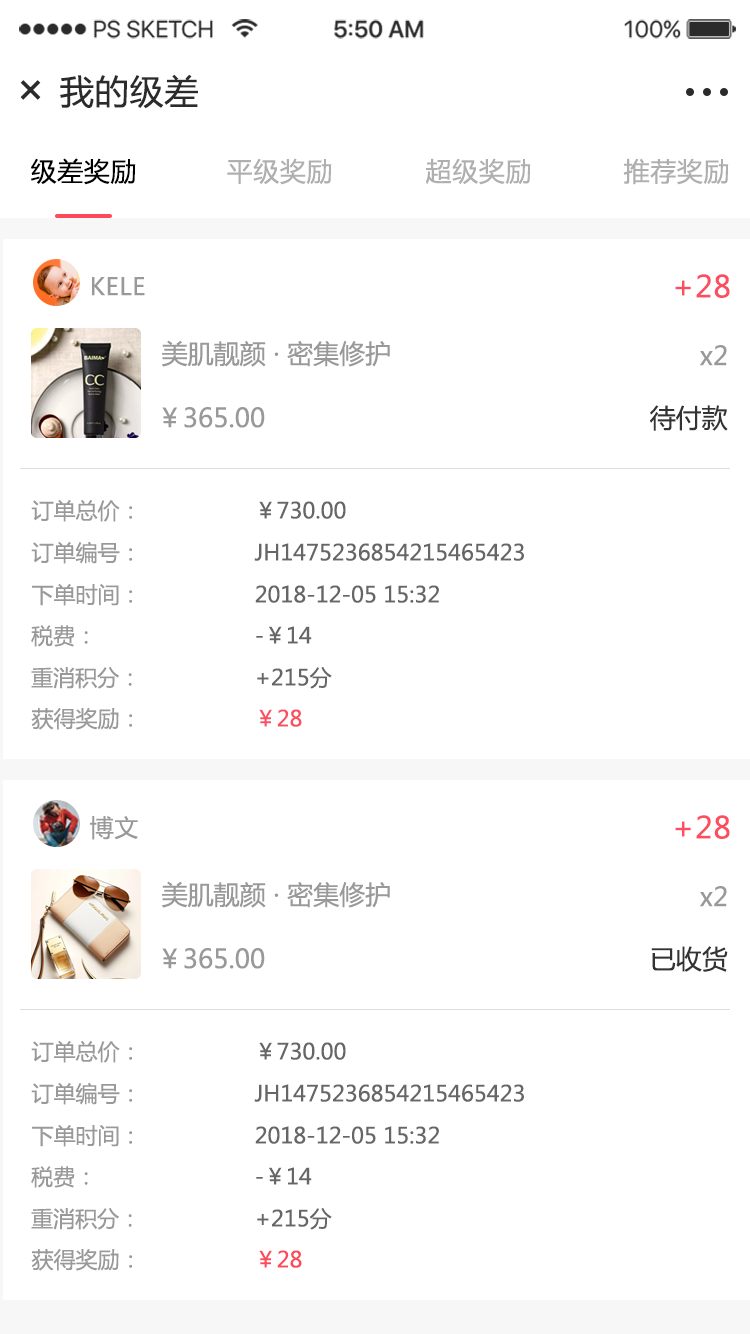
<style>
.page{position:relative;width:750px;height:1334px;background:#ffffff}
.page>*{position:absolute;margin:0}
.t1{font:34px "MicrosoftYaHei";letter-spacing:0.025em;color:#2b2b2b;text-transform:uppercase}
.t2{font:47.9px "MicrosoftYaHei";letter-spacing:0.025em;color:#2b2b2b;text-transform:uppercase}
.t3{font:26px "MicrosoftYaHei";letter-spacing:0.025em;color:#000000}
.t4{font:26px "MicrosoftYaHei";letter-spacing:0.025em;color:#afafaf}
.t5{font:24px "MicrosoftYaHei";letter-spacing:0.025em;color:#999999;text-transform:uppercase}
.t6{font:30px "MicrosoftYaHei";letter-spacing:0.025em;color:#fc4e5f;text-transform:uppercase}
.t7{font:26px "MicrosoftYaHei";color:#999999;text-transform:uppercase}
.t8{font:26px "MicrosoftYaHei";color:#999999}
.t9{font:26px "MicrosoftYaHei";color:#333333;text-transform:uppercase}
.t10{font:22px "MicrosoftYaHei";color:#999999;text-transform:uppercase}
.t11{font:22px "MicrosoftYaHei";color:#666666;text-transform:uppercase}
.t12{font:22px "MicrosoftYaHei";color:#fc4e5f;text-transform:uppercase}
.t13{font:22px "MicrosoftYaHei";color:#fc4a5b;text-transform:uppercase}
</style>
<div class="page">
<p class="t1" style="left:60px;top:74px;width:138px;height:35px">我的级差</p>
<p class="t2" style="left:20px;top:80px;width:21px;height:20px;rotate:45deg">+</p>
<p class="t3" style="left:30px;top:158px;width:106px;height:27px">级差奖励</p>
<p class="t4" style="left:227px;top:158px;width:105px;height:27px">平级奖励</p>
<p class="t4" style="left:426px;top:158px;width:105px;height:27px">超级奖励</p>
<p class="t4" style="left:623px;top:158px;width:106px;height:27px">推荐奖励</p>
<p class="t5" style="left:92px;top:277px;width:53px;height:19px">kele</p>
<p class="t6" style="left:675px;top:274px;width:55px;height:24px">+28</p>
<p class="t7" style="left:162px;top:340px;width:228px;height:27px">美肌靓颜 · 密集修护</p>
<p class="t8" style="left:700px;top:345px;width:27px;height:21px">x2</p>
<p class="t7" style="left:162px;top:407px;width:103px;height:21px">￥365.00</p>
<p class="t9" style="left:650px;top:405px;width:78px;height:26px">待付款</p>
<p class="t10" style="left:31px;top:499px;width:102px;height:23px">订单总价：</p>
<p class="t11" style="left:259px;top:501px;width:87px;height:18px">￥730.00</p>
<p class="t10" style="left:31px;top:541px;width:102px;height:23px">订单编号：</p>
<p class="t11" style="left:254px;top:543px;width:270px;height:18px">Jh1475236854215465423</p>
<p class="t10" style="left:32px;top:583px;width:101px;height:23px">下单时间：</p>
<p class="t11" style="left:255px;top:585px;width:184px;height:18px">2018-12-05 15:32</p>
<p class="t10" style="left:31px;top:625px;width:57px;height:22px">税费：</p>
<p class="t11" style="left:256px;top:626px;width:56px;height:18px">-￥14</p>
<p class="t10" style="left:31px;top:667px;width:101px;height:22px">重消积分：</p>
<p class="t11" style="left:257px;top:667px;width:75px;height:22px">+215分</p>
<p class="t10" style="left:31px;top:708px;width:102px;height:22px">获得奖励：</p>
<p class="t12" style="left:259px;top:709px;width:43px;height:18px">￥28</p>
<p class="t5" style="left:90px;top:816px;width:48px;height:24px">博文</p>
<p class="t6" style="left:675px;top:815px;width:55px;height:24px">+28</p>
<p class="t7" style="left:162px;top:881px;width:228px;height:27px">美肌靓颜 · 密集修护</p>
<p class="t8" style="left:700px;top:886px;width:27px;height:21px">x2</p>
<p class="t7" style="left:162px;top:948px;width:103px;height:21px">￥365.00</p>
<p class="t9" style="left:651px;top:946px;width:77px;height:26px">已收货</p>
<p class="t10" style="left:31px;top:1040px;width:102px;height:23px">订单总价：</p>
<p class="t11" style="left:259px;top:1042px;width:87px;height:18px">￥730.00</p>
<p class="t10" style="left:31px;top:1082px;width:102px;height:23px">订单编号：</p>
<p class="t11" style="left:254px;top:1084px;width:270px;height:18px">Jh1475236854215465423</p>
<p class="t10" style="left:32px;top:1124px;width:101px;height:23px">下单时间：</p>
<p class="t11" style="left:255px;top:1126px;width:184px;height:18px">2018-12-05 15:32</p>
<p class="t10" style="left:31px;top:1166px;width:57px;height:22px">税费：</p>
<p class="t11" style="left:256px;top:1167px;width:56px;height:18px">-￥14</p>
<p class="t10" style="left:31px;top:1208px;width:101px;height:22px">重消积分：</p>
<p class="t11" style="left:257px;top:1208px;width:75px;height:22px">+215分</p>
<p class="t10" style="left:31px;top:1249px;width:102px;height:22px">获得奖励：</p>
<p class="t13" style="left:259px;top:1250px;width:43px;height:18px">￥28</p>
</div>
